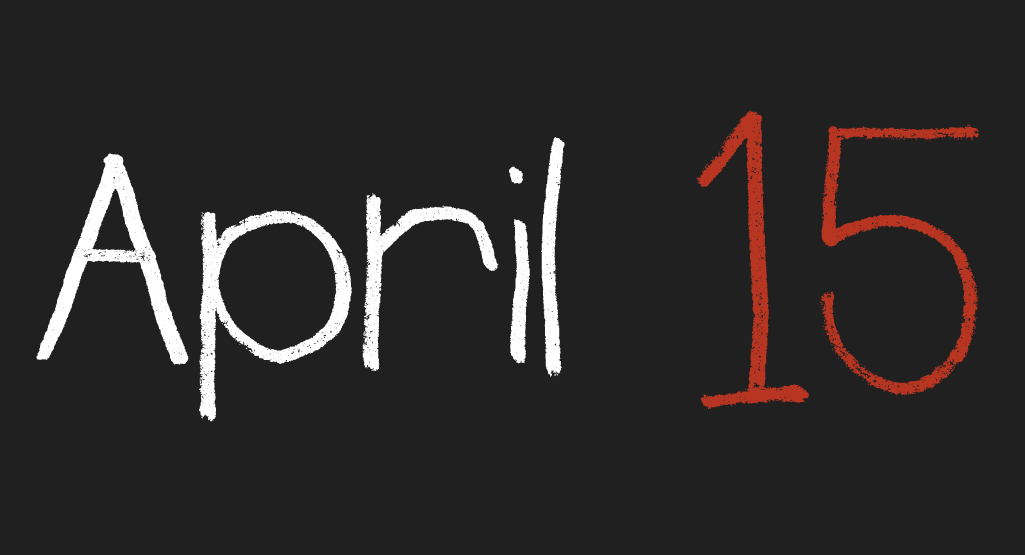
<style>
.page{position:relative;width:1025px;height:555px;background:#202020}
.page>*{position:absolute;margin:0}
.t1{font:375px "Rudiment";color:#ffffff}
.t2{font:375px "Rudiment";color:#b83521}
</style>
<div class="page">
<p class="t1" style="left:36px;top:110px;width:943px;height:312px">April <span class="t2">15</span></p>
</div>
